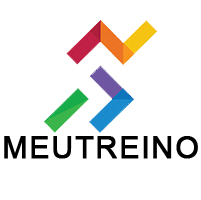
<style>
.page{position:relative;width:201px;height:200px;background:#ffffff}
.page>*{position:absolute;margin:0}
.t1{font:30px "ArialMT";letter-spacing:0.04em;color:#000000;text-transform:uppercase;font-weight:bold}
</style>
<div class="page">
<p class="t1" style="left:4px;top:136px;width:194px;height:23px">MeuTreino</p>
</div>
